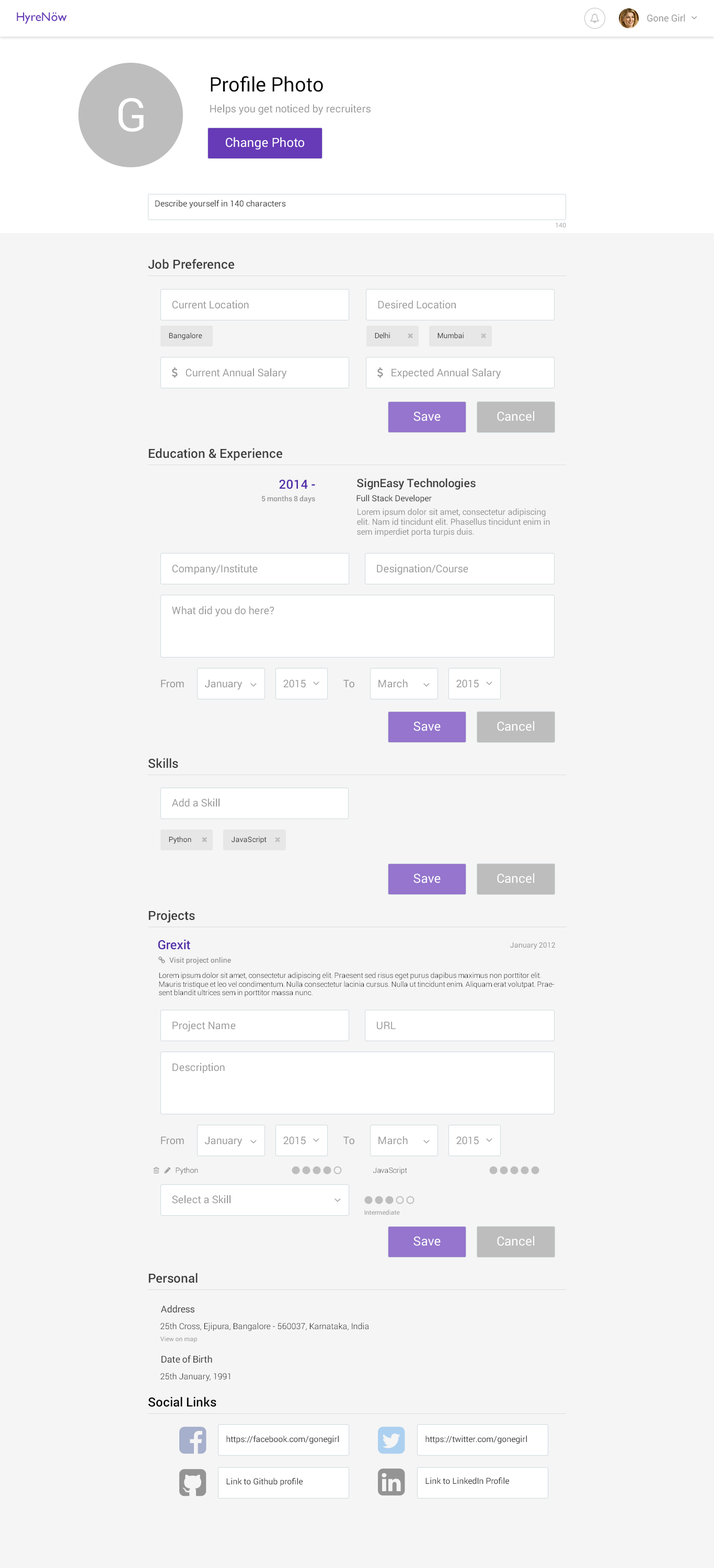
<style>
.page{position:relative;width:714px;height:1568px;background:#f5f5f5}
.page>*{position:absolute;margin:0}
.t1{font:12.5px "GillSans";color:#673ab7}
.t2{font:9.4px "Roboto-Regular";color:#9a9a9a}
.t3{font:19.9px "Roboto-Regular";color:#000000}
.t4{font:46px "Roboto-Regular";color:#ffffff;text-transform:uppercase}
.t5{font:10.5px "Roboto-Regular";color:#9a9a9a}
.t6{font:12.5px "Roboto-Regular";color:#ffffff}
.t7{font:8.4px "Roboto-Regular";color:#404040}
.t8{font:6.3px "Roboto-Regular";color:#9a9a9a}
.t9{font:12.5px "Roboto-Medium";color:#3d3d3d}
.t10{font:7.3px "Roboto-Regular";color:#393939}
.t11{font:12.5px "Roboto-Medium";color:#512da8}
.t12{font:11.5px "Roboto-Medium";color:#3d3d3d}
.t13{font:7.3px "Roboto-Medium";color:#949494}
.t14{font:8.4px "Roboto-Regular";color:#3d3d3d}
.t15{font:8.4px "Roboto-Regular";color:#949494}
.t16{font:10.5px "Roboto-Regular";color:#949494}
.t17{font:7.3px "Roboto-Regular";color:#949494}
.t18{font:7.3px "Roboto-Light";color:#000000}
.t19{font:7.3px "Roboto-Light"}
.t20{font:7.3px "Roboto-Light";color:#3d3d3d}
.t21{font:6.3px "Roboto-Regular";color:#949494}
.t22{font:9.4px "Roboto-Regular";color:#3d3d3d}
.t23{font:8.4px "Roboto-Light";color:#000000}
.t24{font:12.5px "Roboto-Medium";color:#000000}
</style>
<div class="page">
<p class="t1" style="left:17px;top:12px;width:50px;height:12px">HyreNöw</p>
<p class="t2" style="left:647px;top:14px;width:38px;height:8px">Gone Girl</p>
<p class="t3" style="left:211px;top:76px;width:112px;height:16px">Profile Photo</p>
<p class="t4" style="left:118px;top:98px;width:26px;height:34px">G</p>
<p class="t5" style="left:210px;top:104px;width:161px;height:11px">Helps you get noticed by recruiters</p>
<p class="t6" style="left:226px;top:137px;width:78px;height:12px">Change Photo</p>
<p class="t7" style="left:155px;top:200px;width:131px;height:9px">Describe yourself in 140 characters</p>
<p class="t8" style="left:556px;top:223px;width:10px;height:4px">140</p>
<p class="t9" style="left:148px;top:259px;width:86px;height:10px">Job Preference</p>
<p class="t5" style="left:172px;top:300px;width:77px;height:9px">Current Location</p>
<p class="t5" style="left:378px;top:300px;width:78px;height:9px">Desired Location</p>
<p class="t10" style="left:169px;top:332px;width:33px;height:8px">Bangalore</p>
<p class="t10" style="left:375px;top:332px;width:15px;height:7px">Delhi</p>
<p class="t10" style="left:437px;top:332px;width:27px;height:7px">Mumbai</p>
<p class="t5" style="left:186px;top:368px;width:101px;height:11px">Current Annual Salary</p>
<p class="t5" style="left:391px;top:368px;width:110px;height:11px">Expected Annual Salary</p>
<p class="t6" style="left:413px;top:411px;width:28px;height:10px">Save</p>
<p class="t6" style="left:497px;top:411px;width:37px;height:10px">Cancel</p>
<p class="t9" style="left:148px;top:448px;width:134px;height:12px">Education &amp; Experience</p>
<p class="t11" style="left:279px;top:479px;width:36px;height:10px">2014 -</p>
<p class="t12" style="left:357px;top:478px;width:119px;height:12px">SignEasy Technologies</p>
<p class="t13" style="left:262px;top:495px;width:53px;height:8px">5 months 8 days</p>
<p class="t14" style="left:356px;top:494px;width:76px;height:9px">Full Stack Developer</p>
<p class="t15" style="left:357px;top:508px;width:193px;height:29px">Lorem ipsum dolor sit amet, consectetur adipiscing elit. Nam id tincidunt elit. Phasellus tincidunt enim in sem imperdiet porta turpis duis.</p>
<p class="t5" style="left:172px;top:564px;width:86px;height:11px">Company/Institute</p>
<p class="t5" style="left:377px;top:564px;width:91px;height:11px">Designation/Course</p>
<p class="t5" style="left:172px;top:606px;width:102px;height:11px">What did you do here?</p>
<p class="t16" style="left:161px;top:679px;width:23px;height:9px">From</p>
<p class="t5" style="left:205px;top:679px;width:38px;height:11px">January</p>
<p class="t5" style="left:283px;top:679px;width:23px;height:9px">2015</p>
<p class="t16" style="left:343px;top:679px;width:11px;height:9px">To</p>
<p class="t5" style="left:378px;top:679px;width:30px;height:9px">March</p>
<p class="t5" style="left:456px;top:679px;width:23px;height:9px">2015</p>
<p class="t6" style="left:413px;top:721px;width:28px;height:10px">Save</p>
<p class="t6" style="left:497px;top:721px;width:37px;height:10px">Cancel</p>
<p class="t9" style="left:148px;top:758px;width:30px;height:10px">Skills</p>
<p class="t5" style="left:172px;top:798px;width:48px;height:9px">Add a Skill</p>
<p class="t10" style="left:169px;top:836px;width:22px;height:8px">Python</p>
<p class="t10" style="left:232px;top:836px;width:35px;height:8px">JavaScript</p>
<p class="t6" style="left:413px;top:873px;width:28px;height:10px">Save</p>
<p class="t6" style="left:497px;top:873px;width:37px;height:10px">Cancel</p>
<p class="t9" style="left:148px;top:910px;width:47px;height:13px">Projects</p>
<p class="t11" style="left:158px;top:939px;width:32px;height:11px">Grexit</p>
<p class="t17" style="left:510px;top:942px;width:45px;height:7px">January 2012</p>
<p class="t18" style="left:159px;top:972px;width:395px;height:25px">Lorem ipsum dolor sit amet, consectetur adipiscing elit. Praesent sed risus eget purus dapibus maximus non porttitor elit. Mauris tristique et leo vel condimentum. Nulla consectetur lacinia cursus. Nulla ut tincidunt enim. Aliquam erat volutpat. Praesent blandit ultrices sem in porttitor massa nunc.</p>
<p class="t5" style="left:172px;top:1021px;width:64px;height:11px">Project Name</p>
<p class="t5" style="left:377px;top:1021px;width:19px;height:9px">URL</p>
<p class="t5" style="left:172px;top:1063px;width:53px;height:10px">Description</p>
<p class="t16" style="left:161px;top:1136px;width:23px;height:9px">From</p>
<p class="t5" style="left:205px;top:1136px;width:38px;height:11px">January</p>
<p class="t5" style="left:283px;top:1136px;width:23px;height:9px">2015</p>
<p class="t16" style="left:343px;top:1136px;width:11px;height:9px">To</p>
<p class="t5" style="left:378px;top:1136px;width:30px;height:9px">March</p>
<p class="t5" style="left:456px;top:1136px;width:23px;height:9px">2015</p>
<p class="t19" style="left:176px;top:1167px;width:22px;height:7px">Python</p>
<p class="t20" style="left:373px;top:1167px;width:34px;height:7px">JavaScript</p>
<p class="t5" style="left:172px;top:1195px;width:58px;height:9px">Select a Skill</p>
<p class="t21" style="left:364px;top:1209px;width:36px;height:6px">Intermediate</p>
<p class="t6" style="left:413px;top:1236px;width:28px;height:10px">Save</p>
<p class="t6" style="left:497px;top:1236px;width:37px;height:10px">Cancel</p>
<p class="t9" style="left:148px;top:1273px;width:50px;height:10px">Personal</p>
<p class="t22" style="left:161px;top:1305px;width:33px;height:8px">Address</p>
<p class="t23" style="left:160px;top:1322px;width:208px;height:9px">25th Cross, Ejipura, Bangalore - 560037, Karnataka, India</p>
<p class="t21" style="left:160px;top:1336px;width:37px;height:7px">View on map</p>
<p class="t22" style="left:162px;top:1355px;width:50px;height:8px">Date of Birth</p>
<p class="t23" style="left:160px;top:1373px;width:70px;height:8px">25th January, 1991</p>
<p class="t24" style="left:148px;top:1397px;width:68px;height:10px">Social Links</p>
<p class="t7" style="left:226px;top:1435px;width:113px;height:9px">https://facebook.com/gonegirl</p>
<p class="t7" style="left:425px;top:1435px;width:102px;height:9px">https://twitter.com/gonegirl</p>
<p class="t7" style="left:226px;top:1478px;width:77px;height:8px">Link to Github profile</p>
<p class="t7" style="left:425px;top:1477px;width:84px;height:7px">Link to LinkedIn Profile</p>
</div>
